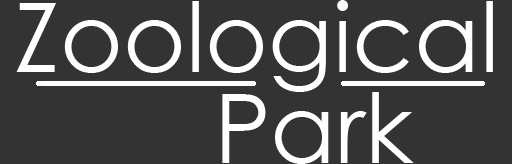
<style>
.page{position:relative;width:512px;height:164px;background:#333333}
.page>*{position:absolute;margin:0}
.t1{font:96px "CenturyGothic";color:#ffffff}
</style>
<div class="page">
<p class="t1" style="left:16px;top:0px;width:477px;height:92px">Zoological</p>
<p class="t1" style="left:222px;top:92px;width:192px;height:72px">Park</p>
</div>
